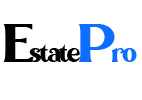
<style>
.page{position:relative;width:142px;height:100px;background:#ffffff}
.page>*{position:absolute;margin:0}
.t1{font:25px "Bilderberg-regular";letter-spacing:-0.08em;color:#000000}
.t2{font:53.2px "Bilderberg-regular";letter-spacing:-0.08em;color:#000000}
.t3{font:53.2px "Bilderberg-regular";letter-spacing:-0.08em;color:#0d6efd}
.t4{font:25px "Bilderberg-regular";letter-spacing:-0.08em;color:#0d6efd}
</style>
<div class="page">
<p class="t1" style="left:3px;top:24px;width:134px;height:38px"><span class="t2">E</span>state<span class="t3">P</span><span class="t4">ro</span></p>
</div>
